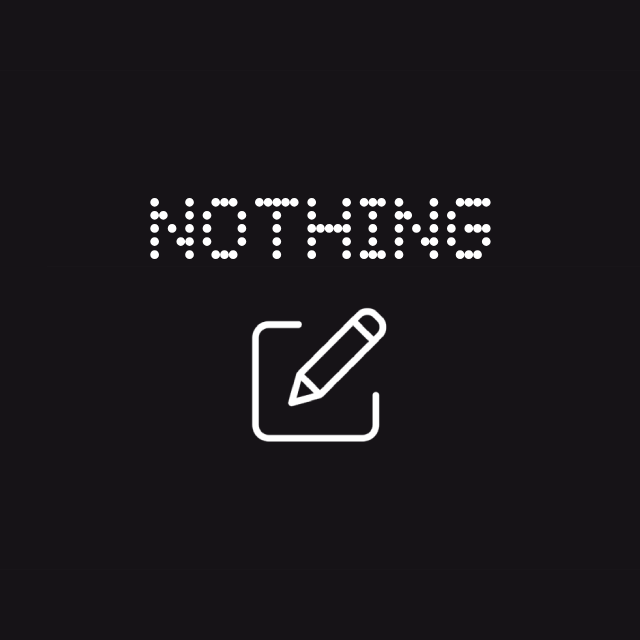
<style>
.page{position:relative;width:640px;height:640px;background:#161317}
.page>*{position:absolute;margin:0}
.t1{font:87.3px "Ndot-55";color:#ffffff}
</style>
<div class="page">
<p class="t1" style="left:150px;top:197px;width:341px;height:62px">NOTHING</p>
</div>
